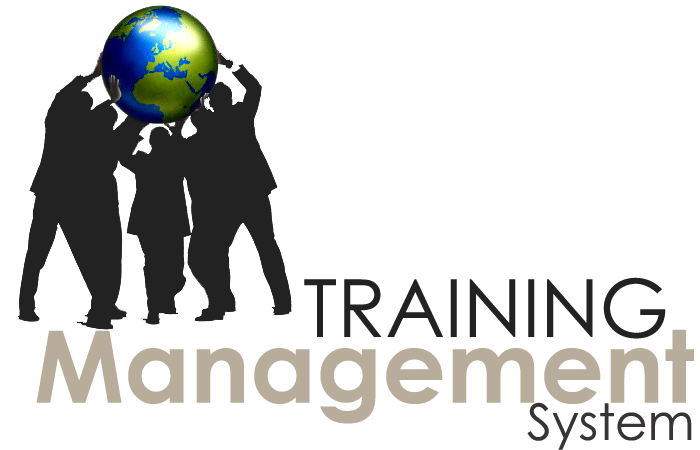
<style>
.page{position:relative;width:700px;height:450px;background:#ffffff}
.page>*{position:absolute;margin:0}
.t1{font:80px "CenturyGothic";color:#222222}
.t2{font:100px "CenturyGothic-Bold";color:#b8ad9b}
.t3{font:50px "CenturyGothic";color:#373435}
</style>
<div class="page">
<p class="t1" style="left:304px;top:277px;width:362px;height:62px">TRAINING</p>
<p class="t2" style="left:36px;top:329px;width:658px;height:95px">Management</p>
<p class="t3" style="left:527px;top:402px;width:165px;height:48px">System</p>
</div>
